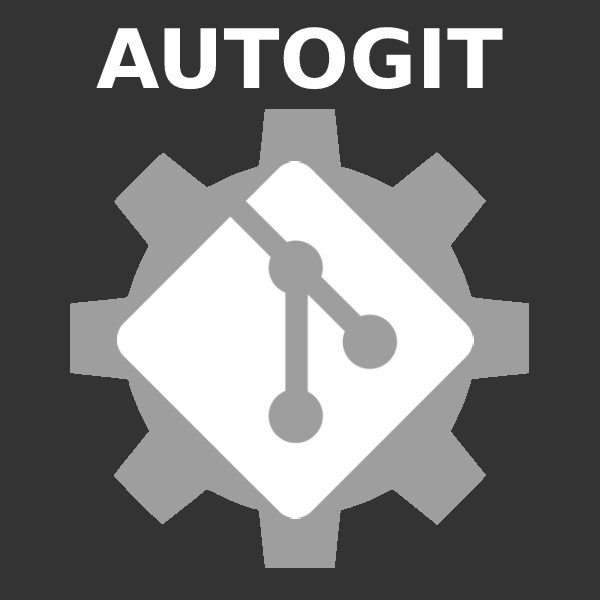
<style>
.page{position:relative;width:600px;height:600px;background:#333333}
.page>*{position:absolute;margin:0}
.t1{font:82px "DejaVuSans-Bold";color:#ffffff}
</style>
<div class="page">
<p class="t1" style="left:96px;top:27px;width:407px;height:63px">AUTOGIT</p>
</div>
